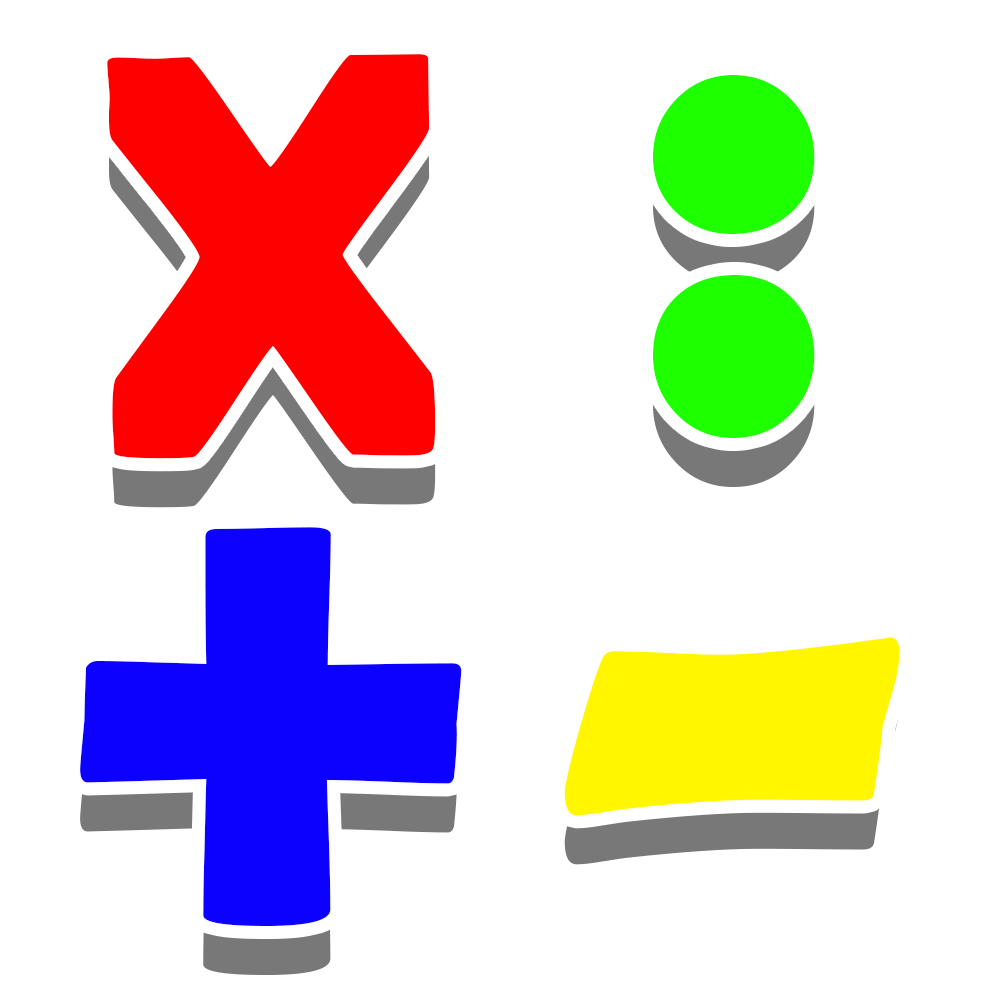
<style>
.page{position:relative;width:1000px;height:1000px;background:#ffffff}
.page>*{position:absolute;margin:0}
.t1{font:583.3px "BerlinSansFBDemi-Bold";color:#ff0000}
.t2{font:826.2px "BerlinSansFBDemi-Bold";color:#1eff00}
.t3{font:875.7px "BerlinSansFBDemi-Bold";color:#0c00ff}
.t4{font:943.9px "BerlinSansFBDemi-Bold";color:#fff600}
</style>
<div class="page">
<p class="t1" style="left:107px;top:54px;width:329px;height:405px;rotate:-1deg">X</p>
<p class="t2" style="left:652px;top:75px;width:163px;height:363px">:</p>
<p class="t3" style="left:80px;top:527px;width:382px;height:399px">+</p>
<p class="t4" style="left:564px;top:637px;width:336px;height:179px">-</p>
</div>
